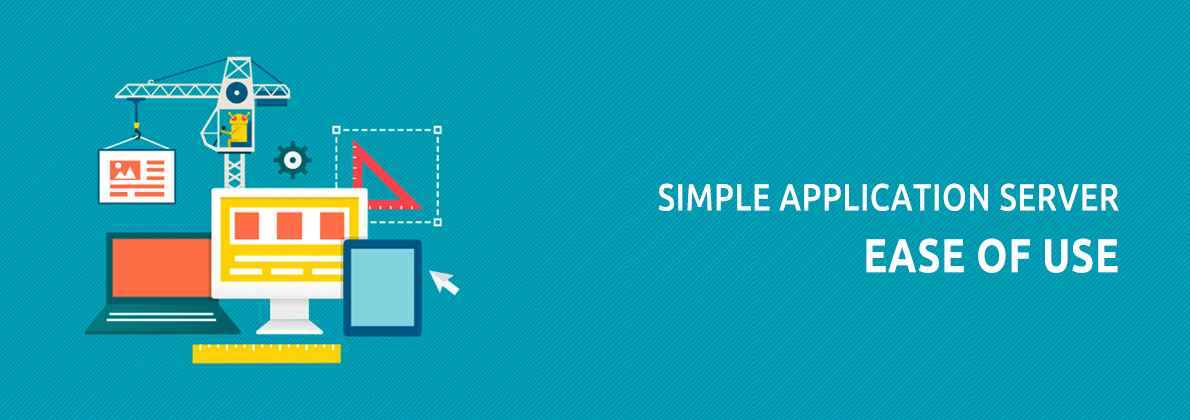
<style>
.page{position:relative;width:1190px;height:420px}
.page>*{position:absolute;margin:0}
.t1{font:38px "Ubuntu-Medium";letter-spacing:0.02em;color:#ffffff;scale:0.83 1}
.t2{font:47.5px "Ubuntu-Bold";letter-spacing:0.02em;color:#ffffff;scale:0.83 1}
</style>
<div class="page">
<p class="t1" style="left:658px;top:183px;width:461px;height:28px">SIMPLE APPLICATION SERVER</p>
<p class="t2" style="left:866px;top:238px;width:252px;height:35px">EASE OF USE</p>
</div>
